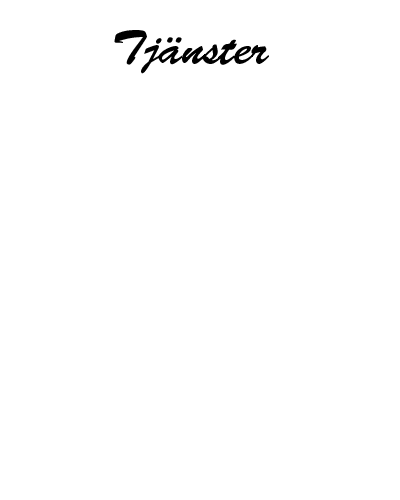
<style>
.page{position:relative;width:400px;height:500px;background:#ffffff}
.page>*{position:absolute;margin:0}
.t1{font:46.7px "BrushScriptStd";color:#000000}
</style>
<div class="page">
<p class="t1" style="left:114px;top:30px;width:155px;height:44px">Tjänster</p>
</div>
